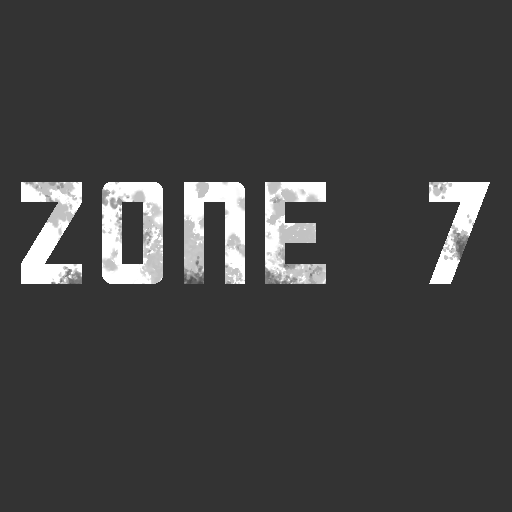
<style>
.page{position:relative;width:512px;height:512px;background:#333333}
.page>*{position:absolute;margin:0}
.t1{font:141.6px "Cornerstone"}
</style>
<div class="page">
<p class="t1" style="left:21px;top:182px;width:469px;height:102px">zone 7</p>
</div>
